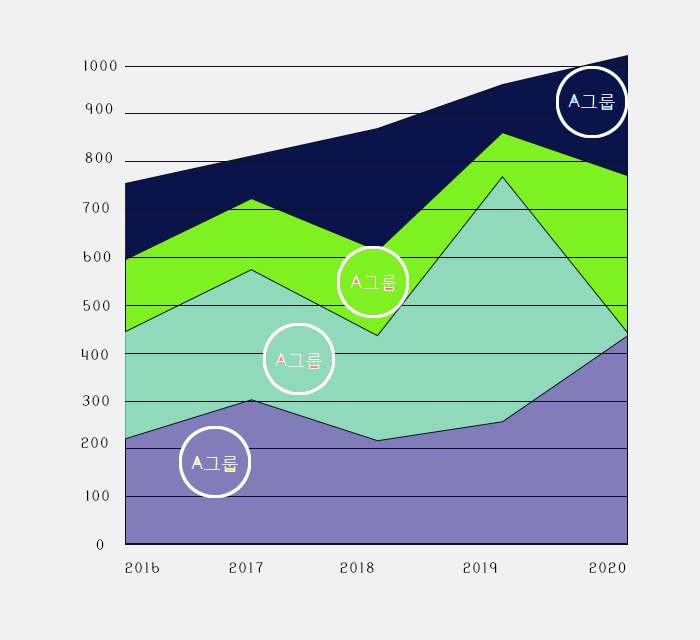
<style>
.page{position:relative;width:700px;height:640px;background:#f1f1f1}
.page>*{position:absolute;margin:0}
.t1{font:20px "AmiR-HM";letter-spacing:0.1em;color:#000000}
</style>
<div class="page">
<p class="t1" style="left:83px;top:60px;width:34px;height:11px">1000</p>
<p class="t1" style="left:85px;top:103px;width:28px;height:11px">900</p>
<p class="t1" style="left:85px;top:152px;width:27px;height:11px">800</p>
<p class="t1" style="left:82px;top:202px;width:27px;height:11px">700</p>
<p class="t1" style="left:83px;top:251px;width:28px;height:11px">600</p>
<p class="t1" style="left:83px;top:300px;width:27px;height:11px">500</p>
<p class="t1" style="left:81px;top:349px;width:27px;height:11px">400</p>
<p class="t1" style="left:82px;top:395px;width:27px;height:11px">300</p>
<p class="t1" style="left:81px;top:437px;width:27px;height:11px">200</p>
<p class="t1" style="left:85px;top:490px;width:24px;height:11px">100</p>
<p class="t1" style="left:96px;top:539px;width:8px;height:11px">0</p>
<p class="t1" style="left:125px;top:562px;width:34px;height:11px">2016</p>
<p class="t1" style="left:229px;top:562px;width:34px;height:11px">2017</p>
<p class="t1" style="left:340px;top:562px;width:34px;height:11px">2018</p>
<p class="t1" style="left:463px;top:562px;width:34px;height:11px">2019</p>
<p class="t1" style="left:589px;top:562px;width:37px;height:11px">2020</p>
</div>
